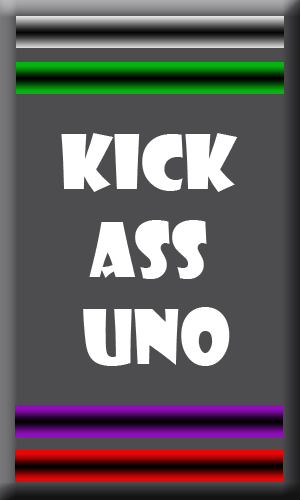
<style>
.page{position:relative;width:300px;height:500px;background:#4d4d50}
.page>*{position:absolute;margin:0}
.t1{font:72.9px "ShowcardGothic-Reg";color:#ffffff}
</style>
<div class="page">
<p class="t1" style="left:61px;top:133px;width:177px;height:233px;text-align:center">KICK <br>ASS <br>UNO</p>
</div>
